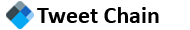
<style>
.page{position:relative;width:190px;height:30px;background:#ffffff}
.page>*{position:absolute;margin:0}
.t1{font:24px "Calibri-Bold";color:#000000}
</style>
<div class="page">
<p class="t1" style="left:37px;top:7px;width:122px;height:16px">Tweet Chain</p>
</div>
